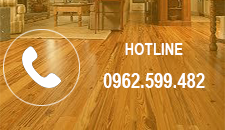
<style>
.page{position:relative;width:225px;height:130px}
.page>*{position:absolute;margin:0}
.t1{font:20.8px/33.3px "Arial-BoldMT";color:#ffffff;scale:0.8 1}
.t2{font:16.7px/33.3px "Arial-BoldMT";color:#ffffff;scale:0.8 1}
</style>
<div class="page">
<p class="t1" style="left:103px;top:43px;width:102px;height:45px;text-align:center"><span class="t2">HOTLINE<br></span>0962.599.482</p>
</div>
